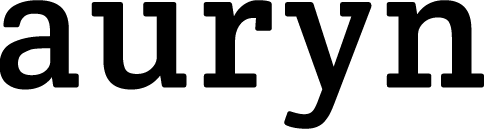
<style>
.page{position:relative;width:484px;height:129px;background:#ffffff}
.page>*{position:absolute;margin:0}
.t1{font:172px "CreteRound-Regular";letter-spacing:0.047em;color:#000000}
</style>
<div class="page">
<p class="t1" style="left:0px;top:0px;width:484px;height:129px">auryn</p>
</div>
